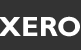
<style>
.page{position:relative;width:81px;height:50px;background:#333333}
.page>*{position:absolute;margin:0}
.t1{font:27.8px "GillSansMT-Bold";color:#ffffff}
</style>
<div class="page">
<p class="t1" style="left:0px;top:16px;width:80px;height:21px">XERO</p>
</div>
